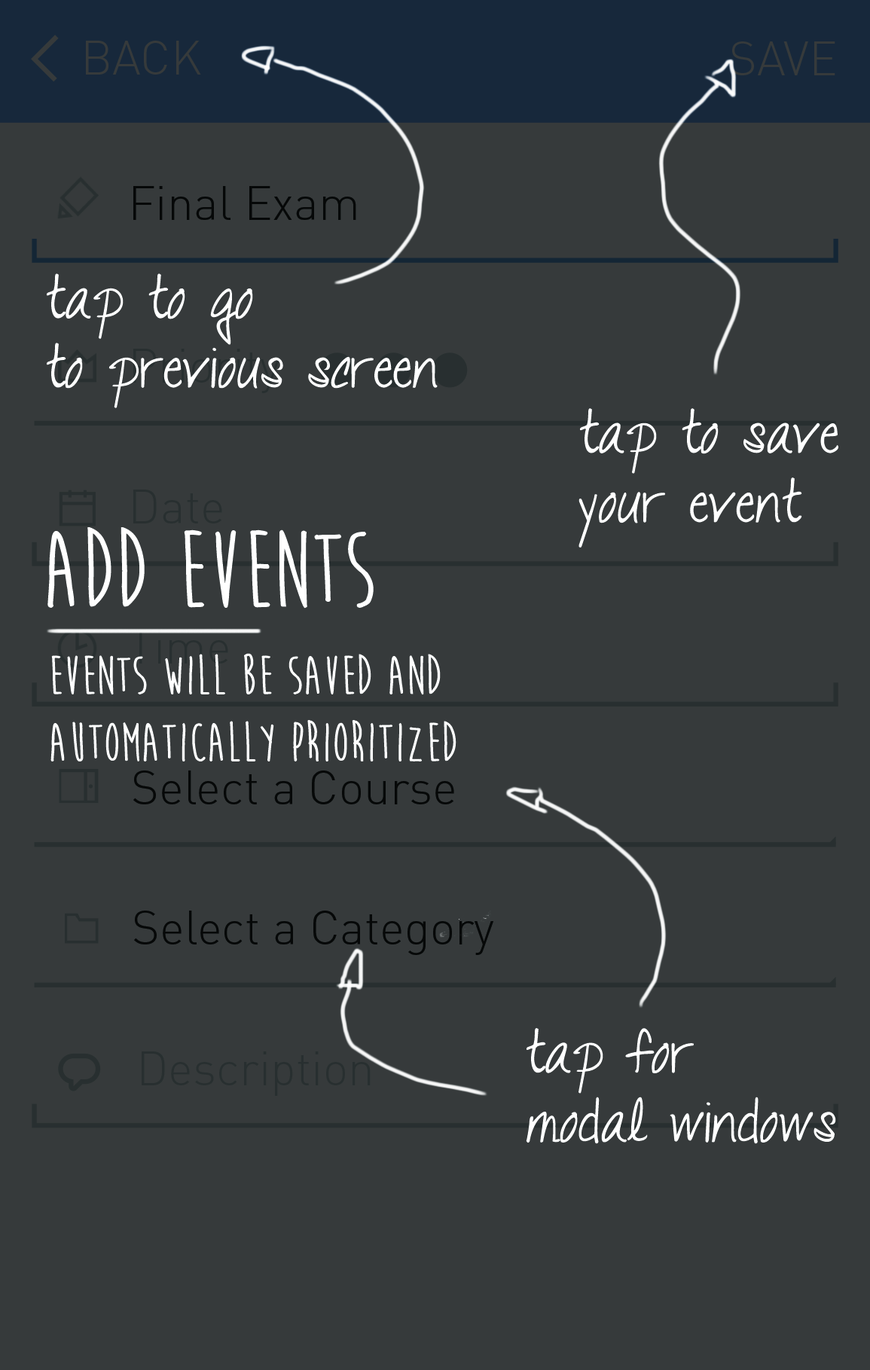
<style>
.page{position:relative;width:870px;height:1370px;background:#363a3b}
.page>*{position:absolute;margin:0}
.t1{font:57.7px "TalkingtotheMoon";color:#ffffff}
.t2{font:111.8px "MoonFlowerBold";color:#ffffff}
.t3{font:55.9px "MoonFlowerBold";color:#ffffff}
</style>
<div class="page">
<p class="t1" style="left:47px;top:273px;width:391px;height:135px">tap to go <br>to previous screen</p>
<p class="t1" style="left:579px;top:408px;width:260px;height:140px">tap to save<br>your event</p>
<p class="t2" style="left:47px;top:527px;width:327px;height:82px">ADD EVENTS</p>
<p class="t3" style="left:50px;top:653px;width:407px;height:109px">EVENTS WILL BE SAVED AND<br>AUTOMATICALLY PRIORITIZED</p>
<p class="t1" style="left:526px;top:1028px;width:310px;height:116px">tap for<br>modal windows</p>
</div>
